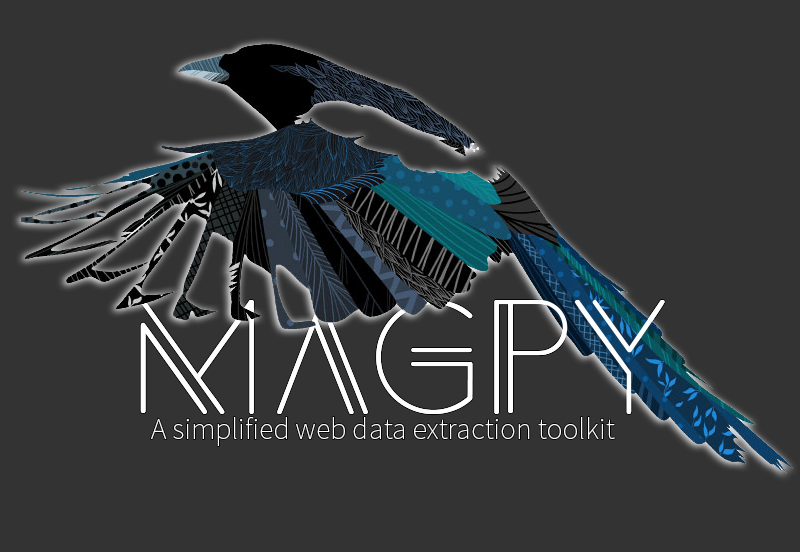
<style>
.page{position:relative;width:800px;height:552px;background:#333333}
.page>*{position:absolute;margin:0}
.t1{font:142.6px "Anders";color:#fefefe}
.t2{font:30px "SourceSansPro-ExtraLight";color:#fefefe}
</style>
<div class="page">
<p class="t1" style="left:140px;top:300px;width:525px;height:114px">MagPY</p>
<p class="t2" style="left:151px;top:417px;width:464px;height:29px">A simplified web data extraction toolkit</p>
</div>
